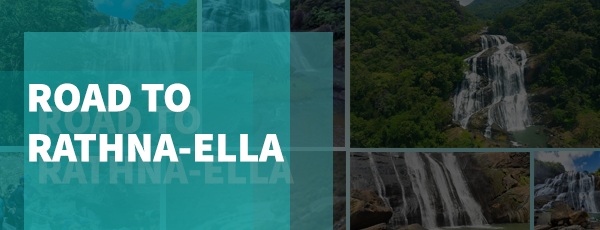
<style>
.page{position:relative;width:600px;height:230px}
.page>*{position:absolute;margin:0}
.t1{font:41.8px "SourceSansPro-Black";color:#ffffff}
</style>
<div class="page">
<p class="t1" style="left:29px;top:83px;width:255px;height:79px">ROAD TO<br>RATHNA-ELLA</p>
</div>
